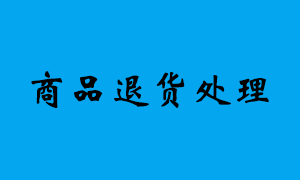
<style>
.page{position:relative;width:300px;height:180px;background:#05a6f0}
.page>*{position:absolute;margin:0}
.t1{font:40px "STXinwei";color:#000000;font-weight:bold}
</style>
<div class="page">
<p class="t1" style="left:31px;top:71px;width:238px;height:37px">商品退货处理</p>
</div>
